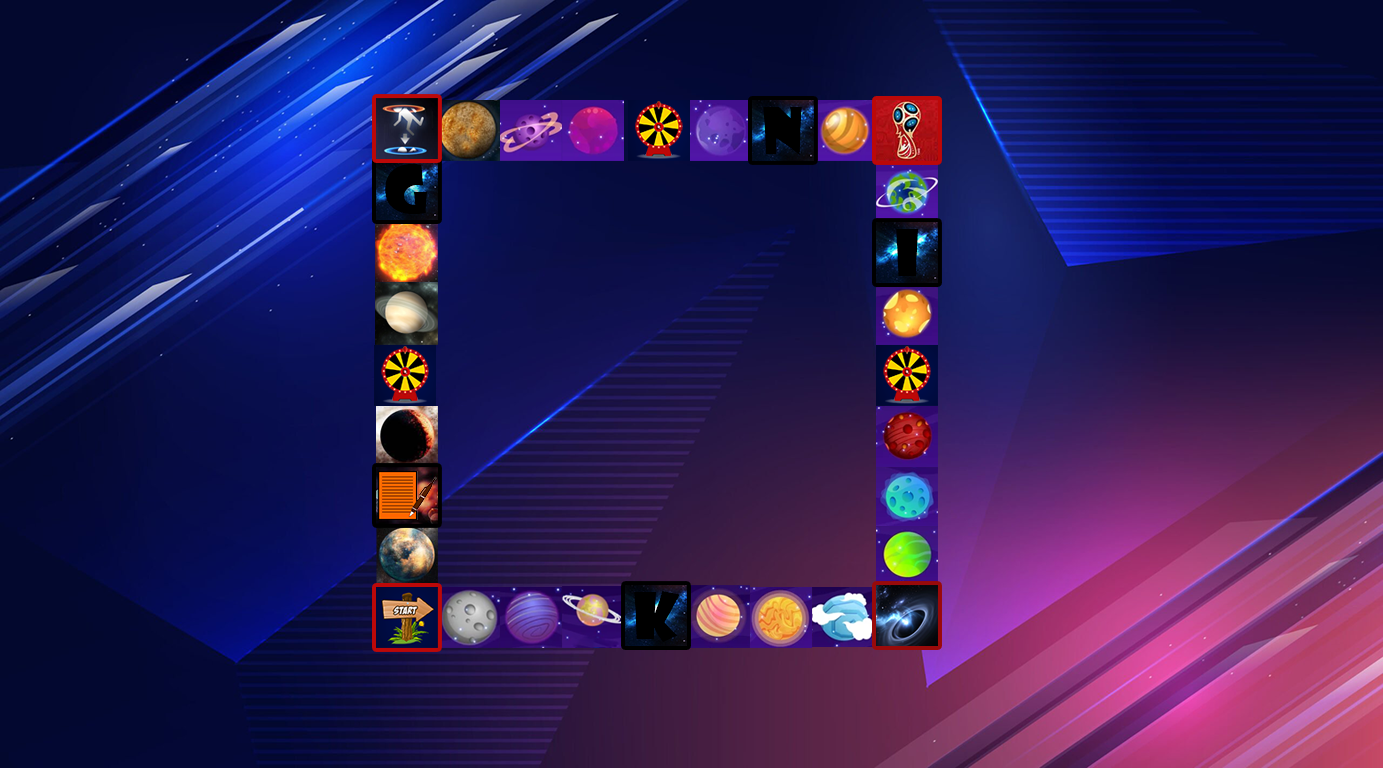
<style>
.page{position:relative;width:1383px;height:768px}
.page>*{position:absolute;margin:0}
.t1{font:63px "ShowcardGothic-Reg";color:#000000}
</style>
<div class="page">
<p class="t1" style="left:763px;top:107px;width:39px;height:48px">n</p>
<p class="t1" style="left:385px;top:164px;width:42px;height:50px">g</p>
<p class="t1" style="left:896px;top:229px;width:22px;height:47px">i</p>
<p class="t1" style="left:634px;top:591px;width:46px;height:51px">K</p>
</div>
